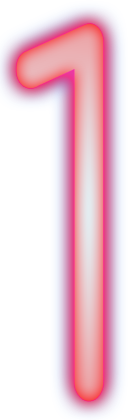
<style>
.page{position:relative;width:132px;height:420px;background:#ffffff}
.page>*{position:absolute;margin:0}
.t1{font:481.8px "Comfortaa-Regular";letter-spacing:0.025em;scale:0.76 1}
</style>
<div class="page">
<p class="t1" style="left:16px;top:23px;width:88px;height:378px">1</p>
<p class="t1" style="left:16px;top:23px;width:88px;height:378px">1</p>
</div>
